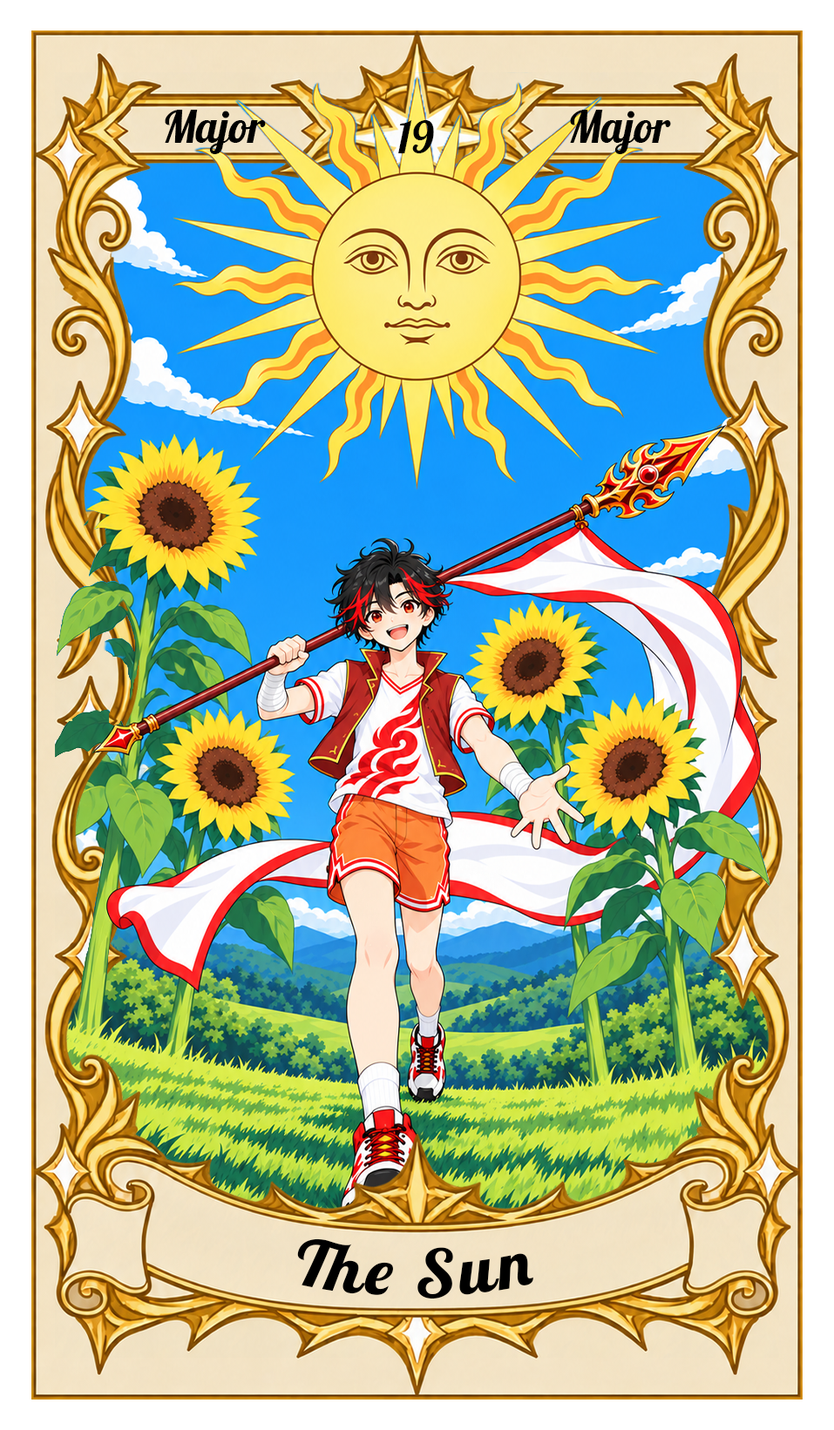
<style>
.page{position:relative;width:834px;height:1430px}
.page>*{position:absolute;margin:0}
.t1{font:43.6px "Lobster-Regular";color:#000000}
.t2{font:65.3px "Lobster-Regular";letter-spacing:0.05em;color:#000000}
</style>
<div class="page">
<p class="t1" style="left:165px;top:110px;width:101px;height:44px">Major</p>
<p class="t1" style="left:570px;top:110px;width:101px;height:44px">Major</p>
<p class="t1" style="left:398px;top:120px;width:36px;height:33px">19</p>
<p class="t2" style="left:297px;top:1239px;width:236px;height:60px">The Sun</p>
</div>
